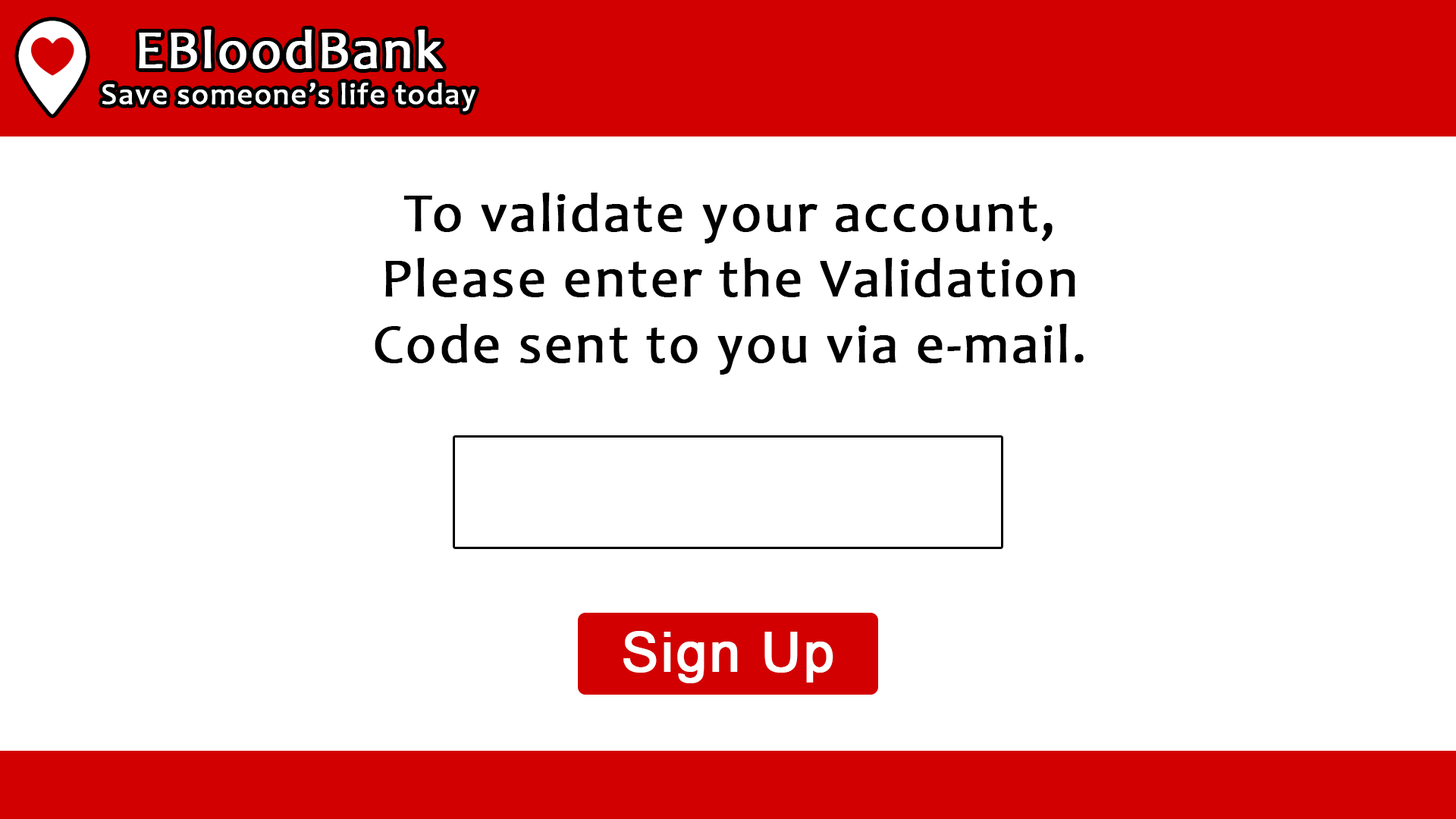
<style>
.page{position:relative;width:1456px;height:819px;background:#ffffff}
.page>*{position:absolute;margin:0}
.t1{font:30.3px "Candara";letter-spacing:0.03em;color:#ffffff;font-weight:bold}
.t2{font:54.6px "Candara";letter-spacing:0.03em;color:#ffffff;font-weight:bold}
.t3{font:54.6px "Candara";letter-spacing:0.03em;color:#000000;font-weight:bold}
.t4{font:54.6px "ArialMT";letter-spacing:0.03em;color:#ffffff;font-weight:bold}
</style>
<div class="page">
<p class="t1" style="left:102px;top:30px;width:373px;height:81px;text-align:center"><span class="t2">EBloodBank<br></span>Save someone’s life today</p>
<p class="t3" style="left:375px;top:193px;width:709px;height:182px;text-align:center">To validate your account,<br>Please enter the Validation<br>Code sent to you via e-mail.</p>
<p class="t4" style="left:623px;top:631px;width:210px;height:52px">Sign Up</p>
</div>
